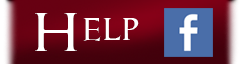
<style>
.page{position:relative;width:241px;height:64px}
.page>*{position:absolute;margin:0}
.t1{font:60px "Assassin$";color:#ffffff}
</style>
<div class="page">
<p class="t1" style="left:35px;top:13px;width:104px;height:38px">Help</p>
</div>
